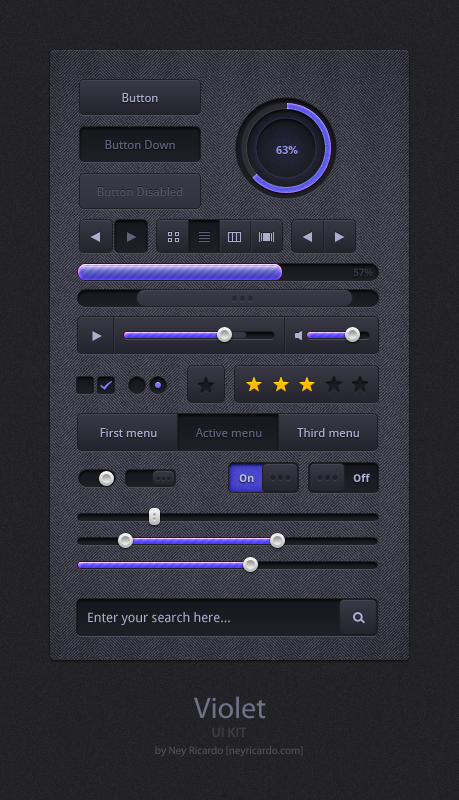
<style>
.page{position:relative;width:459px;height:800px}
.page>*{position:absolute;margin:0}
.t1{font:12px "DroidSans";color:#abaed0}
.t2{font:12px "DroidSans";color:#5e6179}
.t3{font:11px "DroidSans-Bold";color:#9197e1}
.t4{font:12px "DroidSans";color:#535362}
.t5{font:10px "DroidSans-Bold";color:#383a4a}
.t6{font:11px "DroidSans-Bold";color:#abaed0}
.t7{font:11px "DroidSans-Bold";color:#bbbedf}
.t8{font:13px "DroidSans";color:#abaed0}
</style>
<div class="page">
<p class="t1" style="left:122px;top:93px;width:36px;height:9px">Button</p>
<p class="t2" style="left:105px;top:140px;width:70px;height:9px">Button Down</p>
<p class="t3" style="left:276px;top:146px;width:22px;height:8px">63%</p>
<p class="t4" style="left:97px;top:187px;width:86px;height:9px">Button Disabled</p>
<p class="t5" style="left:353px;top:268px;width:20px;height:8px">57%</p>
<p class="t1" style="left:100px;top:428px;width:57px;height:9px">First menu</p>
<p class="t2" style="left:195px;top:428px;width:67px;height:9px">Active menu</p>
<p class="t1" style="left:297px;top:428px;width:62px;height:9px">Third menu</p>
<p class="t6" style="left:353px;top:473px;width:17px;height:9px">Off</p>
<p class="t7" style="left:239px;top:474px;width:15px;height:8px">On</p>
<p class="t8" style="left:88px;top:612px;width:142px;height:13px">Enter your search here...</p>
</div>
